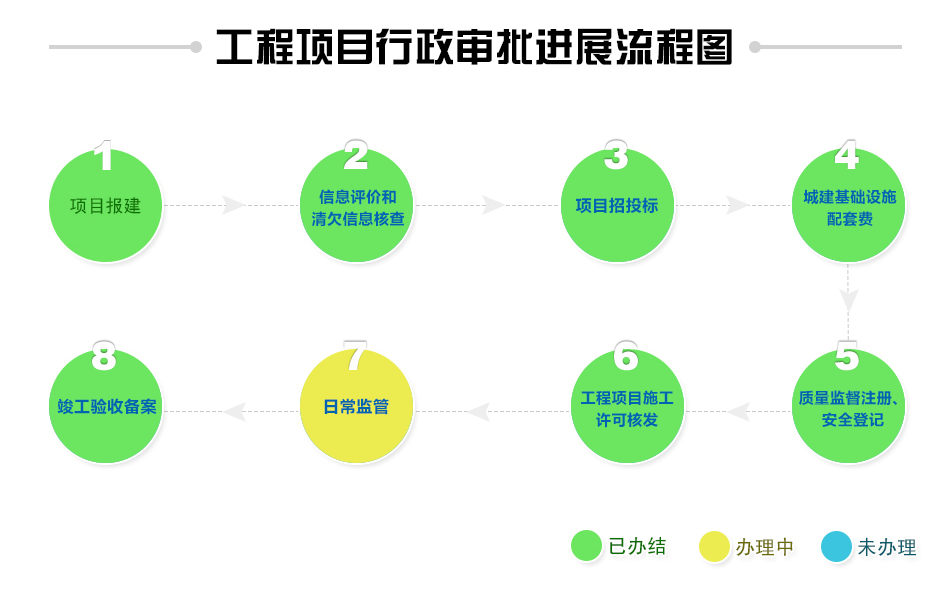
<style>
.page{position:relative;width:950px;height:600px;background:#ffffff}
.page>*{position:absolute;margin:0}
.t1{font:40px "FZCCHJW--GB1-0";color:#fefefe;text-transform:uppercase}
.t2{font:15px/22px "MicrosoftYaHei";letter-spacing:0.04em;color:#0064b1;text-transform:uppercase}
.t3{font:16px "MicrosoftYaHei";letter-spacing:0.04em;color:#0064b1;text-transform:uppercase}
</style>
<div class="page">
<p class="t1" style="left:344px;top:140px;width:24px;height:29px">2</p>
<p class="t1" style="left:604px;top:140px;width:24px;height:30px">3</p>
<p class="t1" style="left:835px;top:140px;width:24px;height:29px">4</p>
<p class="t2" style="left:311px;top:189px;width:94px;height:37px;text-align:center">信息评价和<br>清欠信息核查</p>
<p class="t3" style="left:576px;top:197px;width:82px;height:17px">项目招投标</p>
<p class="t2" style="left:803px;top:189px;width:94px;height:38px;text-align:center">城建基础设施<br>配套费</p>
<p class="t1" style="left:92px;top:341px;width:24px;height:30px">8</p>
<p class="t1" style="left:344px;top:341px;width:23px;height:29px">7</p>
<p class="t1" style="left:614px;top:341px;width:24px;height:30px">6</p>
<p class="t1" style="left:835px;top:341px;width:24px;height:30px">5</p>
<p class="t2" style="left:581px;top:390px;width:93px;height:38px;text-align:center">工程项目施工<br>许可核发</p>
<p class="t2" style="left:799px;top:390px;width:98px;height:37px;text-align:center">质量监督注册、<br>安全登记</p>
<p class="t3" style="left:57px;top:398px;width:100px;height:17px">竣工验收备案</p>
<p class="t3" style="left:324px;top:398px;width:65px;height:17px">日常监管</p>
</div>
